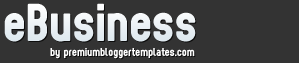
<style>
.page{position:relative;width:299px;height:63px;background:#333333}
.page>*{position:absolute;margin:0}
.t1{font:55px "Sugo";color:#ffffff}
.t2{font:12px "Sugo";color:#ffffff}
</style>
<div class="page">
<p class="t1" style="left:4px;top:3px;width:192px;height:39px">eBusiness</p>
<p class="t2" style="left:50px;top:48px;width:145px;height:11px">by premiumbloggertemplates.com</p>
</div>
